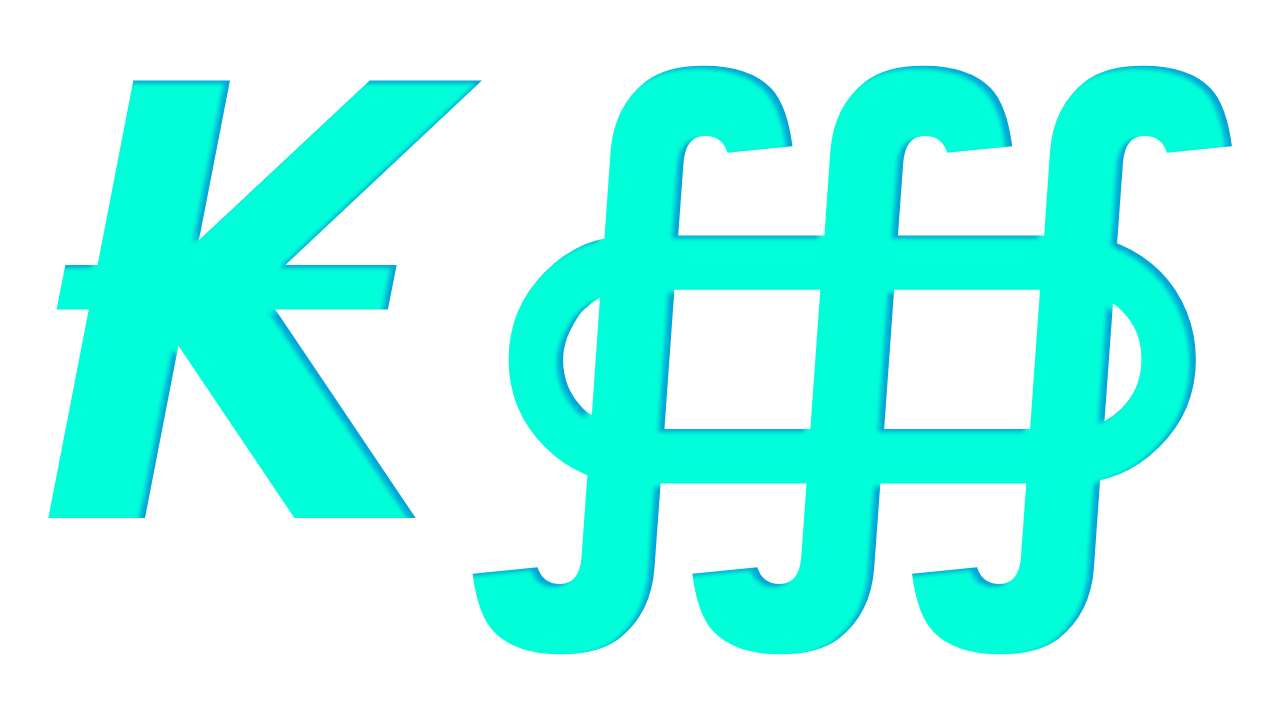
<style>
.page{position:relative;width:1280px;height:720px;background:#ffffff}
.page>*{position:absolute;margin:0}
.t1{font:600px "DejaVuSans-BoldOblique";color:#00ffd8}
</style>
<div class="page">
<p class="t1" style="left:48px;top:65px;width:1184px;height:590px">₭∰</p>
</div>
